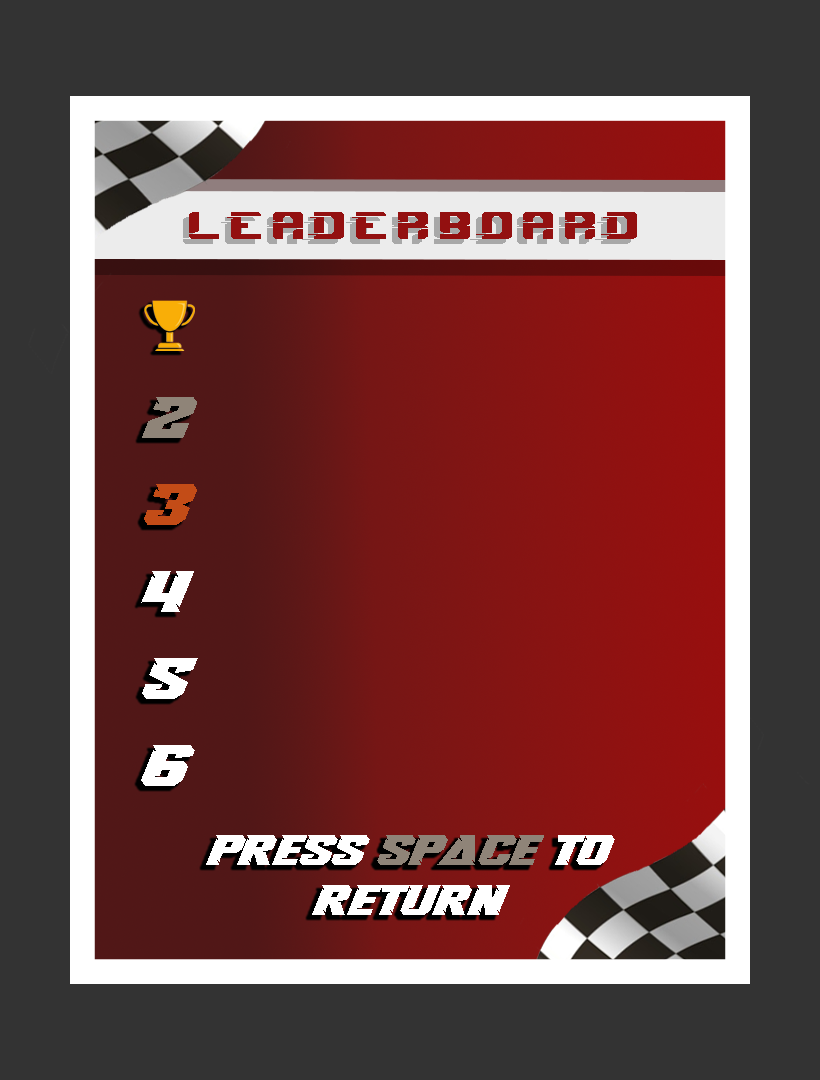
<style>
.page{position:relative;width:820px;height:1080px;background:#333333}
.page>*{position:absolute;margin:0}
.t1{font:57.1px "SprintRaceDemoRegular";color:#931010;scale:1.11 1}
.t2{font:57.1px "RushDriver-Italic";color:#8f8478;scale:1.11 1}
.t3{font:57.1px "RushDriver-Italic";color:#c34c17;scale:1.11 1}
.t4{font:57.1px "RushDriver-Italic";color:#ffffff;scale:1.11 1}
.t5{font:41px/50.8px "RushDriver-Italic";color:#ffffff;scale:1.11 1}
.t6{font:41px/50.8px "RushDriver-Italic";color:#8f8478;scale:1.11 1}
</style>
<div class="page">
<p class="t1" style="left:189px;top:212px;width:448px;height:27px">leaderboard</p>
<p class="t2" style="left:142px;top:397px;width:55px;height:41px">2</p>
<p class="t3" style="left:144px;top:484px;width:53px;height:41px">3</p>
<p class="t4" style="left:141px;top:571px;width:53px;height:41px">4</p>
<p class="t4" style="left:142px;top:658px;width:56px;height:41px">5</p>
<p class="t4" style="left:141px;top:745px;width:54px;height:41px">6</p>
<p class="t5" style="left:206px;top:835px;width:409px;height:80px;text-align:center">PRESS <span class="t6">SPACE </span>TO <br>RETURN</p>
</div>
